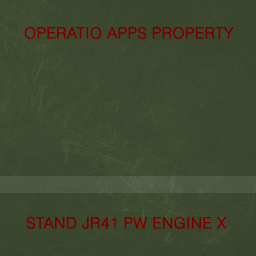
<style>
.page{position:relative;width:256px;height:256px}
.page>*{position:absolute;margin:0}
.t1{font:15.4px "Helvetica-Light";color:#760000;font-weight:bold}
</style>
<div class="page">
<p class="t1" style="left:24px;top:26px;width:210px;height:13px">OPERATIO APPS PROPERTY</p>
<p class="t1" style="left:26px;top:216px;width:201px;height:13px">STAND JR41 PW ENGINE X</p>
</div>
